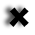
<style>
.page{position:relative;width:35px;height:35px;background:#ffffff}
.page>*{position:absolute;margin:0}
.t1{font:29px "LithosPro-Black";color:#000000}
</style>
<div class="page">
<p class="t1" style="left:9px;top:7px;width:20px;height:20px">x</p>
</div>
